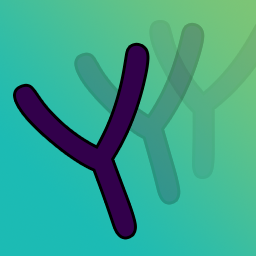
<style>
.page{position:relative;width:256px;height:256px}
.page>*{position:absolute;margin:0}
.t1{font:187.5px "KristenITC-Regular";color:#32004b}
</style>
<div class="page">
<p class="t1" style="left:16px;top:45px;width:131px;height:192px;rotate:-20deg">Yvv</p>
</div>
